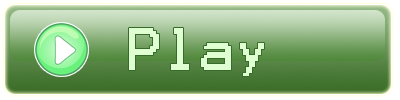
<style>
.page{position:relative;width:400px;height:100px}
.page>*{position:absolute;margin:0}
.t1{font:48px "Terminal";color:#dffed1}
</style>
<div class="page">
<p class="t1" style="left:129px;top:28px;width:135px;height:48px">Play</p>
</div>
